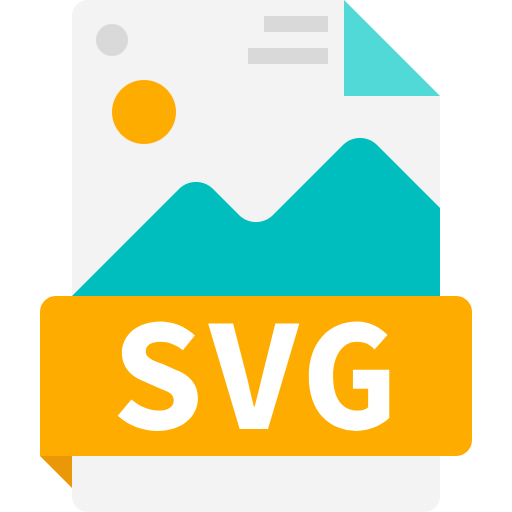
<style>
.page{position:relative;width:512px;height:512px;background:#ffffff}
.page>*{position:absolute;margin:0}
.t1{font:160px "OfficeCodePro-Bold";color:#ffffff}
</style>
<div class="page">
<p class="t1" style="left:117px;top:321px;width:273px;height:110px">SVG</p>
</div>
